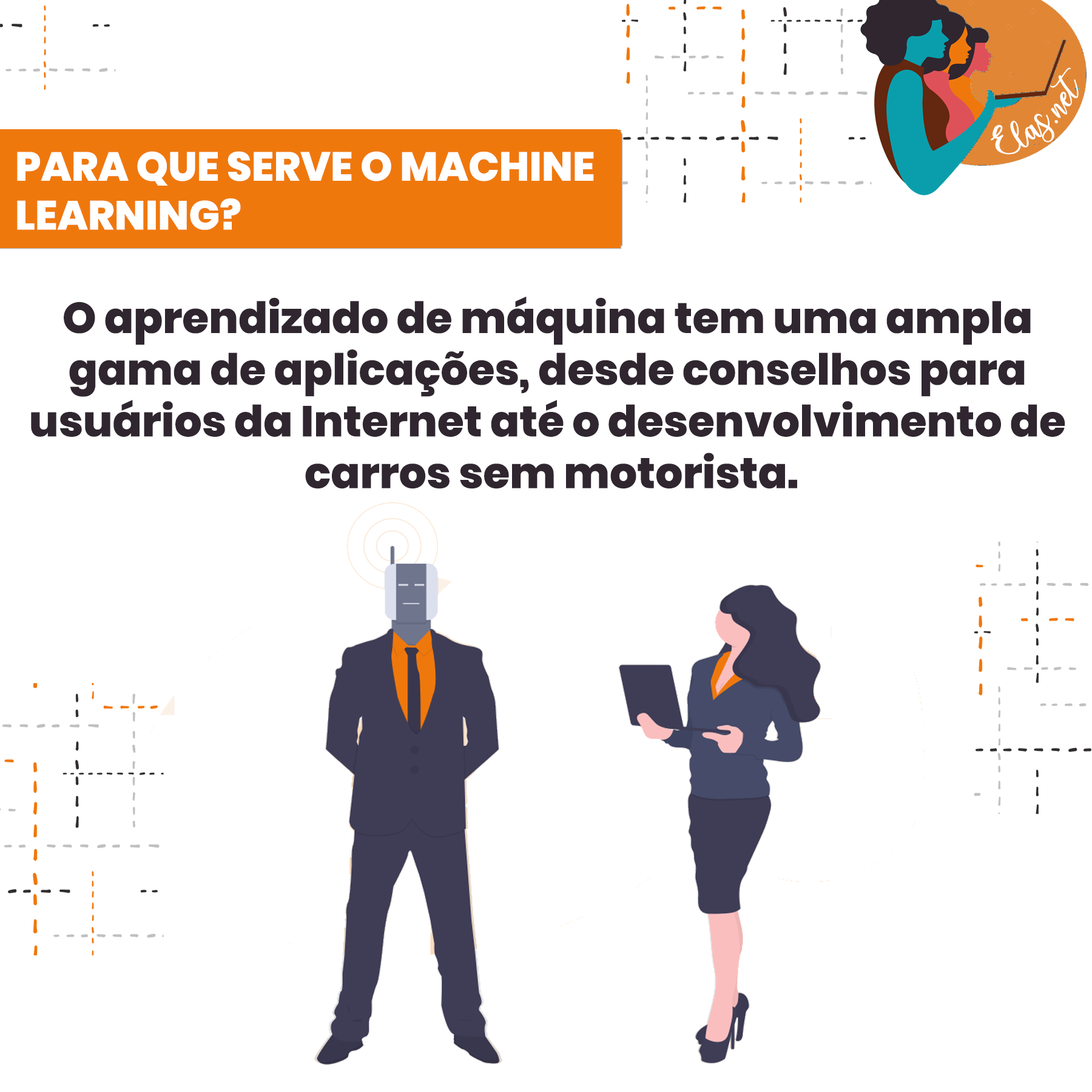
<style>
.page{position:relative;width:1092px;height:1092px;background:#ffffff}
.page>*{position:absolute;margin:0}
.t1{font:25px "charlinda-Regular";color:#ffffff;scale:1.18 1}
.t2{font:40.6px "Poppins-ExtraBold";color:#ffffff;text-transform:uppercase}
.t3{font:43.1px "Poppins-ExtraBold";color:#2f262f}
</style>
<div class="page">
<p class="t1" style="left:991px;top:67px;width:88px;height:88px;rotate:-42deg">Elas.net</p>
<p class="t2" style="left:17px;top:151px;width:577px;height:79px">Para que serve o machine<br>learning?</p>
<p class="t3" style="left:31px;top:297px;width:1034px;height:192px;text-align:center">O aprendizado de máquina tem uma ampla <br>gama de aplicações, desde conselhos para <br>usuários da Internet até o desenvolvimento de <br>carros sem motorista.</p>
</div>
